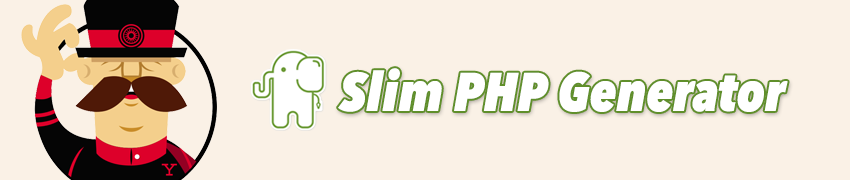
<style>
.page{position:relative;width:850px;height:180px;background:#faf1e6}
.page>*{position:absolute;margin:0}
.t1{font:53.6px "AvenirNextCondensed-HeavyItalic";color:#ffffff}
</style>
<div class="page">
<p class="t1" style="left:338px;top:68px;width:450px;height:44px">Slim PHP Generator</p>
</div>
